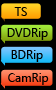
<style>
.page{position:relative;width:56px;height:90px;background:#000000}
.page>*{position:absolute;margin:0}
.t1{font:12px "SegoeUI";color:#000000}
</style>
<div class="page">
<p class="t1" style="left:14px;top:7px;width:13px;height:9px">TS</p>
<p class="t1" style="left:7px;top:28px;width:41px;height:12px">DVDRip</p>
<p class="t1" style="left:11px;top:50px;width:32px;height:12px">BDRip</p>
<p class="t1" style="left:8px;top:73px;width:41px;height:12px">CamRip</p>
</div>
